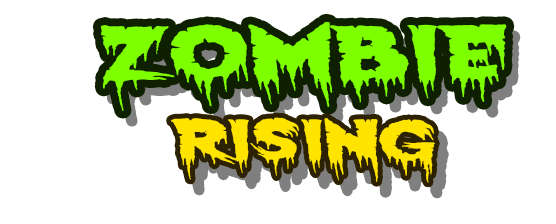
<style>
.page{position:relative;width:556px;height:224px;background:#ffffff}
.page>*{position:absolute;margin:0}
.t1{font:75px "ExquisiteCorpse";color:#7eff00;scale:1.87 1}
.t2{font:54.8px "ExquisiteCorpse";color:#ffe400;scale:1.85 1}
</style>
<div class="page">
<p class="t1" style="left:100px;top:21px;width:407px;height:90px">Zombie</p>
<p class="t2" style="left:171px;top:117px;width:264px;height:66px">Rising</p>
</div>
